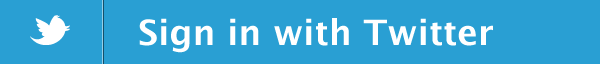
<style>
.page{position:relative;width:600px;height:64px;background:#299fd3}
.page>*{position:absolute;margin:0}
.t1{font:35px "LucidaGrande-Bold";color:#ffffff}
</style>
<div class="page">
<p class="t1" style="left:139px;top:18px;width:354px;height:35px">Sign in with Twitter</p>
</div>
